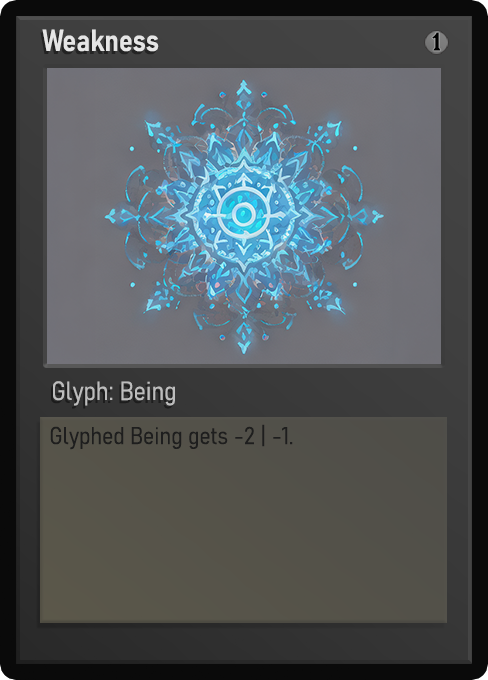
<style>
.page{position:relative;width:488px;height:680px}
.page>*{position:absolute;margin:0}
.t1{font:30px "Bahnschrift-SemiBoldSemiCondensed";color:#f2f2f2;font-weight:bold}
.t2{font:25px "WTRRoycroft";color:#000000;font-weight:bold;scale:1.09 1}
.t3{font:26px "Bahnschrift-LightSemiCondensed";color:#c8c8c8;font-weight:bold}
.t4{font:24px "Bahnschrift-LightSemiCondensed";color:#1e1e1e;font-weight:bold}
</style>
<div class="page">
<p class="t1" style="left:42px;top:29px;width:117px;height:23px;opacity:0.9">Weakness</p>
<p class="t2" style="left:432px;top:32px;width:9px;height:19px">1</p>
<p class="t3" style="left:53px;top:381px;width:122px;height:25px;opacity:0.9">Glyph: Being</p>
<p class="t4" style="left:50px;top:424px;width:243px;height:26px">Glyphed Being gets -2 | -1.</p>
</div>
